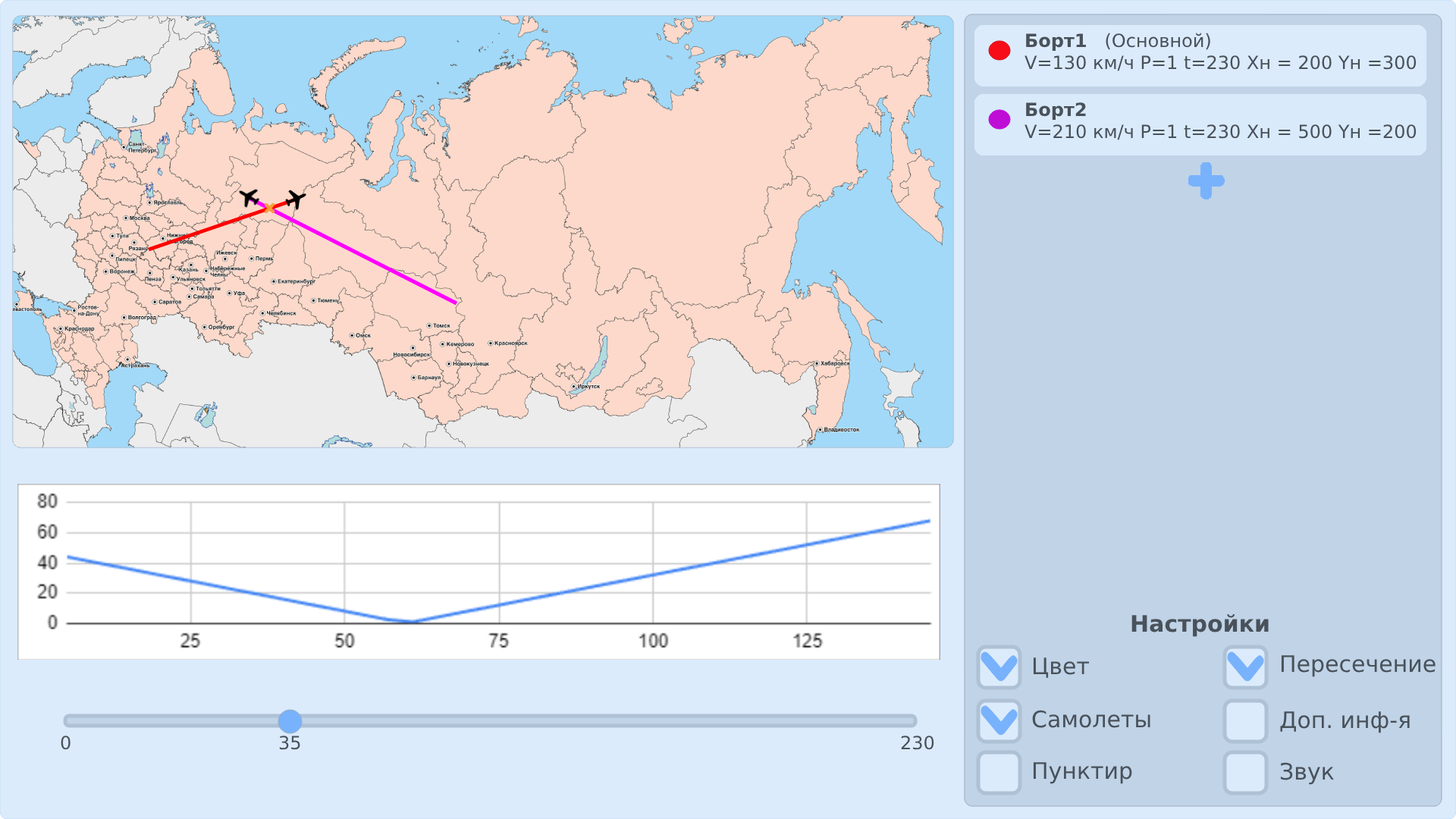
<style>
.page{position:relative;width:1456px;height:819px;background:#c0d3e7}
.page>*{position:absolute;margin:0}
.t1{font:18.2px "DejaVuSans";color:#49515a}
.t2{font:18.2px "DejaVuSans-Bold";color:#dbebfc}
.t3{font:18.2px "DejaVuSans-Bold";color:#49515a}
.t4{font:22.7px "DejaVuSans-Bold";color:#49515a}
.t5{font:22.7px "DejaVuSans";color:#49515a}
.t6{font:18.2px "DejaVuSans";color:#76230d}
</style>
<div class="page">
<p class="t1" style="left:1024px;top:33px;width:393px;height:38px"><span class="t2">Б</span><span class="t3">орт1   </span>(Основной)         <br>V=130 км/ч P=1 t=230 Xн = 200 Yн =300<br>н = 300</p>
<p class="t1" style="left:1024px;top:102px;width:393px;height:38px"><span class="t3">Борт2            <br></span>V=210 км/ч P=1 t=230 Xн = 500 Yн =200<br>н = 300</p>
<p class="t4" style="left:1131px;top:614px;width:138px;height:23px">Настройки</p>
<p class="t5" style="left:1033px;top:657px;width:57px;height:21px">Цвет</p>
<p class="t5" style="left:1281px;top:655px;width:155px;height:22px">Пересечение</p>
<p class="t5" style="left:1032px;top:710px;width:118px;height:18px">Самолеты</p>
<p class="t5" style="left:1280px;top:711px;width:130px;height:22px">Доп. инф-я</p>
<p class="t1" style="left:61px;top:736px;width:10px;height:14px">0</p>
<p class="t6" style="left:279px;top:736px;width:21px;height:14px">3<span class="t1">5</span></p>
<p class="t1" style="left:901px;top:736px;width:33px;height:14px">230</p>
<p class="t5" style="left:1033px;top:762px;width:99px;height:22px">Пунктир</p>
<p class="t5" style="left:1280px;top:762px;width:54px;height:23px">Звук</p>
</div>
